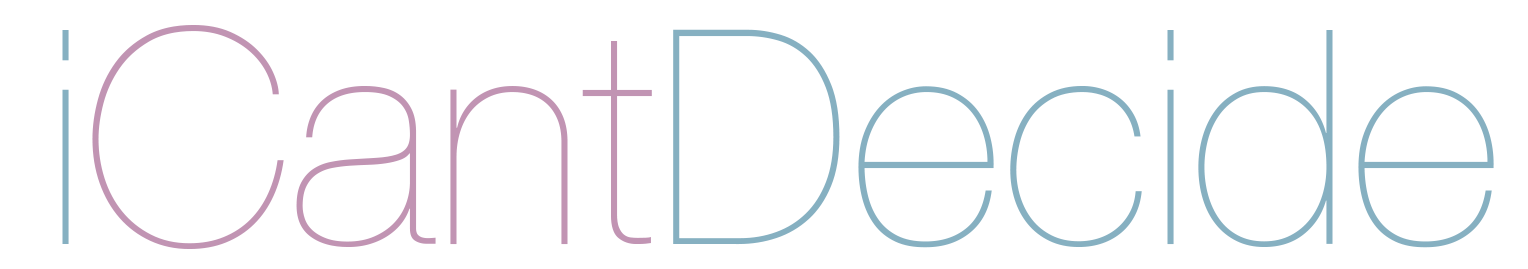
<style>
.page{position:relative;width:1528px;height:269px;background:#ffffff}
.page>*{position:absolute;margin:0}
.t1{font:300px "HelveticaNeue-UltraLight";color:#86b0c1}
.t2{font:300px "HelveticaNeue-UltraLight";color:#c194b3}
</style>
<div class="page">
<p class="t1" style="left:62px;top:25px;width:1432px;height:224px">i<span class="t2">Cant</span>Decide</p>
</div>
